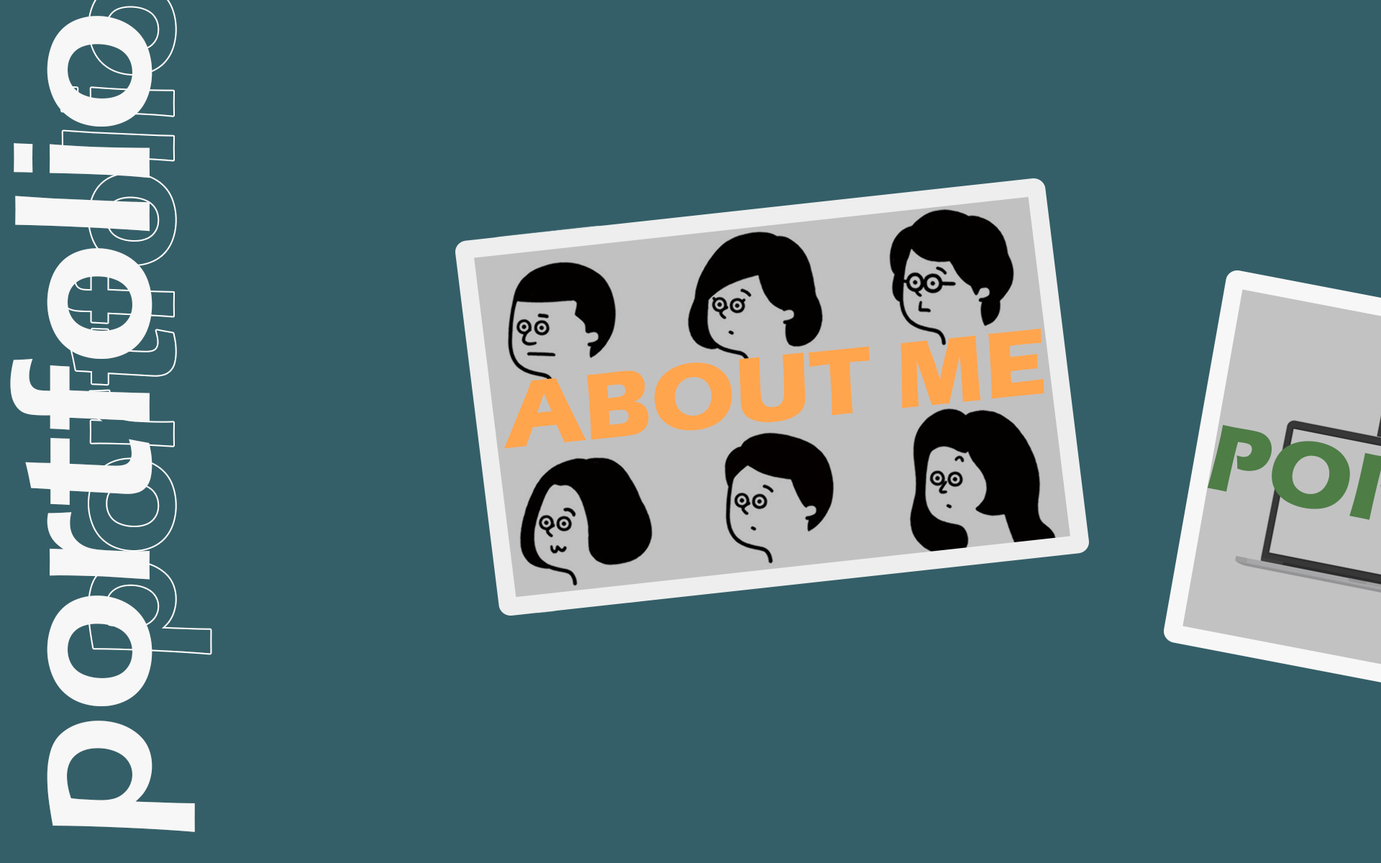
<style>
.page{position:relative;width:1381px;height:863px;background:#345f68}
.page>*{position:absolute;margin:0}
.t1{font:201.4px "ErasITC-Demi";color:#f7f7f7}
.t2{font:97.1px "ErasITC-Bold";color:#ffa54d}
</style>
<div class="page">
<p class="t1" style="left:10px;top:16px;width:185px;height:816px;rotate:-90deg">portfolio</p>
<p class="t2" style="left:504px;top:328px;width:541px;height:121px;rotate:-6deg">ABOUT ME</p>
</div>
